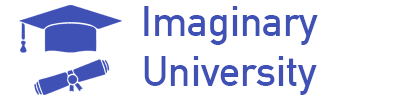
<style>
.page{position:relative;width:400px;height:100px;background:#ffffff}
.page>*{position:absolute;margin:0}
.t1{font:41.7px "DINAlternate-Bold";color:#3f51b5}
</style>
<div class="page">
<p class="t1" style="left:144px;top:6px;width:174px;height:89px;text-align:center">Imaginary<br>University</p>
</div>
